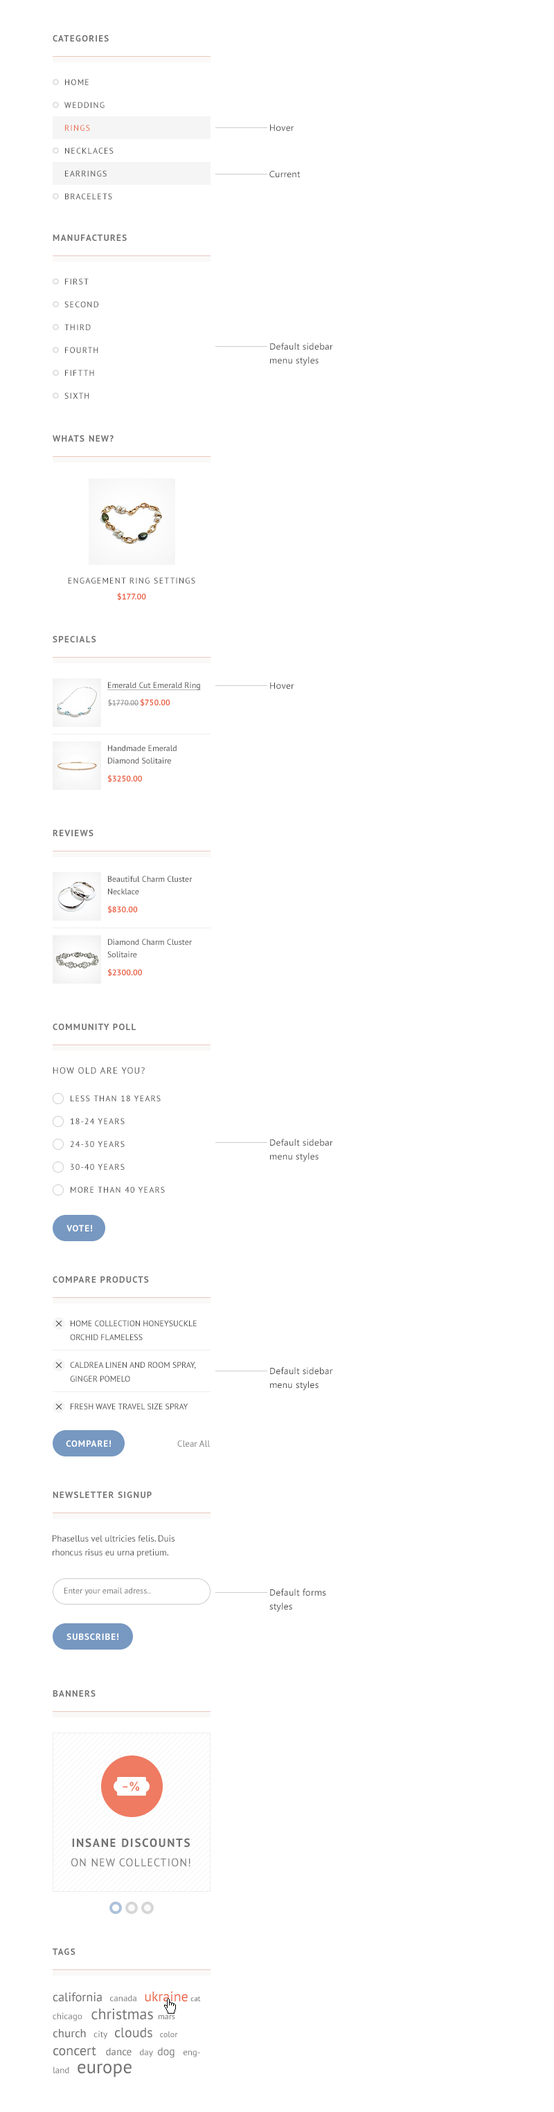
<style>
.page{position:relative;width:554px;height:2112px;background:#ffffff}
.page>*{position:absolute;margin:0}
.t1{font:9px "PTSans-Bold";letter-spacing:0.1em;color:#707070;text-transform:uppercase}
.t2{font:8.3px/22.8px "PTSans-Regular";letter-spacing:0.1em;color:#444444;text-transform:uppercase}
.t3{font:8.3px "PTSans-Regular";letter-spacing:0.1em;color:#eb6447;text-transform:uppercase}
.t4{font:9px "SegoeUI";letter-spacing:0.025em;color:#444444}
.t5{font:9px/13.8px "SegoeUI";letter-spacing:0.025em;color:#444444}
.t6{font:8.3px "PTSans-Regular";letter-spacing:0.1em;color:#444444;text-transform:uppercase}
.t7{font:8.3px "PTSans-Bold";color:#eb6447}
.t8{font:8.3px "PTSans-Regular";color:#444444;text-decoration:underline}
.t9{font:7.6px "PTSans-Regular";color:#777777}
.t10{font:8.3px/12.5px "PTSans-Regular";color:#444444}
.t11{font:9px "PTSans-Regular";letter-spacing:0.1em;color:#444444;text-transform:uppercase}
.t12{font:9px "PTSans-Bold";letter-spacing:0.075em;color:#ffffff;text-transform:uppercase}
.t13{font:8.3px/13.8px "PTSans-Regular";color:#444444;text-transform:uppercase}
.t14{font:9px "PTSans-Regular";color:#707070}
.t15{font:9px/13.8px "PTSans-Regular";color:#444444}
.t16{font:8.3px "PTSans-Regular";color:#777777}
.t17{font:11.1px/19.4px "PTSans-Regular";letter-spacing:0.065em;color:#707070;text-transform:uppercase}
.t18{font:11.8px/19.4px "PTSans-Bold";letter-spacing:0.1em;color:#707070;text-transform:uppercase}
.t19{font:12.5px/18px "PTSans-Regular";color:#707070}
.t20{font:9px/18px "PTSans-Regular";color:#707070}
.t21{font:13.8px/18px "PTSans-Regular";color:#eb6447}
.t22{font:7.6px/18px "PTSans-Regular";color:#707070}
.t23{font:15.2px/18px "PTSans-Regular";color:#707070}
.t24{font:8.3px/18px "PTSans-Regular";color:#707070}
.t25{font:11.8px/18px "PTSans-Regular";color:#707070}
.t26{font:13.8px/18px "PTSans-Regular";color:#707070}
.t27{font:10.4px/18px "PTSans-Regular";color:#707070}
.t28{font:11.1px/18px "PTSans-Regular";color:#707070}
.t29{font:18.7px/18px "PTSans-Regular";color:#707070}
</style>
<div class="page">
<p class="t1" style="left:53px;top:35px;width:56px;height:7px">Categories</p>
<p class="t2" style="left:64px;top:79px;width:50px;height:120px">Home<br>Wedding<br>Rings<br>Necklaces<br>Earrings<br>Bracelets</p>
<p class="t3" style="left:65px;top:125px;width:25px;height:6px">Rings</p>
<p class="t4" style="left:270px;top:125px;width:24px;height:7px">Hover</p>
<p class="t4" style="left:269px;top:170px;width:31px;height:8px">Current</p>
<p class="t1" style="left:53px;top:234px;width:74px;height:7px">Manufactures</p>
<p class="t2" style="left:64px;top:278px;width:34px;height:121px">First<br>Second<br>Third<br>Fourth<br>Fiftth<br>sixth</p>
<p class="t5" style="left:270px;top:343px;width:63px;height:23px">Default sidebar <br>menu styles</p>
<p class="t1" style="left:53px;top:435px;width:61px;height:7px">Whats new?</p>
<p class="t6" style="left:68px;top:577px;width:127px;height:7px">Engagement Ring Settings</p>
<p class="t7" style="left:117px;top:593px;width:29px;height:7px">$177.00</p>
<p class="t1" style="left:53px;top:636px;width:43px;height:6px">Specials</p>
<p class="t8" style="left:107px;top:682px;width:94px;height:8px">Emerald Cut Emerald Ring</p>
<p class="t4" style="left:270px;top:683px;width:24px;height:7px">Hover</p>
<p class="t9" style="left:107px;top:699px;width:32px;height:7px">$1770.00</p>
<p class="t7" style="left:141px;top:699px;width:29px;height:7px">$750.00</p>
<p class="t10" style="left:108px;top:745px;width:69px;height:19px">Handmade Emerald Diamond Solitaire</p>
<p class="t7" style="left:108px;top:775px;width:34px;height:7px">$3250.00</p>
<p class="t1" style="left:53px;top:829px;width:40px;height:7px">Reviews</p>
<p class="t10" style="left:108px;top:876px;width:84px;height:18px">Beautiful Charm Cluster Necklace</p>
<p class="t7" style="left:108px;top:906px;width:30px;height:7px">$830.00</p>
<p class="t10" style="left:107px;top:939px;width:85px;height:18px">Diamond Charm Cluster Solitaire</p>
<p class="t7" style="left:108px;top:968px;width:34px;height:8px">$2300.00</p>
<p class="t1" style="left:53px;top:1023px;width:83px;height:7px">Community Poll</p>
<p class="t11" style="left:53px;top:1067px;width:92px;height:7px">How old are you?</p>
<p class="t2" style="left:70px;top:1095px;width:95px;height:98px">less than 18 years<br>18-24 years<br>24-30 years<br>30-40 years<br>More than 40 years</p>
<p class="t5" style="left:270px;top:1139px;width:63px;height:23px">Default sidebar <br>menu styles</p>
<p class="t12" style="left:66px;top:1225px;width:26px;height:7px">Vote!</p>
<p class="t1" style="left:53px;top:1276px;width:96px;height:7px">Compare Products</p>
<p class="t13" style="left:70px;top:1320px;width:127px;height:89px">Home Collection Honeysuckle <br>Orchid Flameless<br><br>Caldrea Linen and Room Spray, <br>Ginger Pomelo<br><br>Fresh Wave Travel Size Spray</p>
<p class="t5" style="left:270px;top:1367px;width:63px;height:24px">Default sidebar <br>menu styles</p>
<p class="t12" style="left:66px;top:1440px;width:45px;height:7px">Compare!</p>
<p class="t14" style="left:177px;top:1440px;width:33px;height:7px">Clear All</p>
<p class="t1" style="left:53px;top:1491px;width:99px;height:7px">Newsletter Signup</p>
<p class="t15" style="left:53px;top:1535px;width:121px;height:23px">Phasellus vel ultricies felis. Duis <br>rhoncus risus eu urna pretium.</p>
<p class="t16" style="left:64px;top:1587px;width:87px;height:9px">Enter your email adress..</p>
<p class="t5" style="left:269px;top:1589px;width:57px;height:23px">Default forms <br>styles</p>
<p class="t12" style="left:66px;top:1633px;width:52px;height:7px">Subscribe!</p>
<p class="t1" style="left:53px;top:1690px;width:43px;height:7px">Banners</p>
<p class="t17" style="left:71px;top:1838px;width:119px;height:29px;text-align:center"><span class="t18">Insane discounts<br></span>on new collection!</p>
<p class="t1" style="left:53px;top:1948px;width:22px;height:7px">Tags</p>
<p class="t19" style="left:53px;top:1991px;width:148px;height:87px">california<span class="t20">   canada   </span><span class="t21">ukraine </span><span class="t22">cat   </span><span class="t20">chicago  </span><span class="t23">christmas </span><span class="t24">mars   </span><span class="t25">church</span><span class="t20">   city   </span><span class="t26">clouds  </span><span class="t24"> color   </span><span class="t26">concert   </span><span class="t27">dance </span><span class="t20">  day  </span><span class="t28">dog </span><span class="t20">  england   </span><span class="t29">europe</span></p>
</div>
